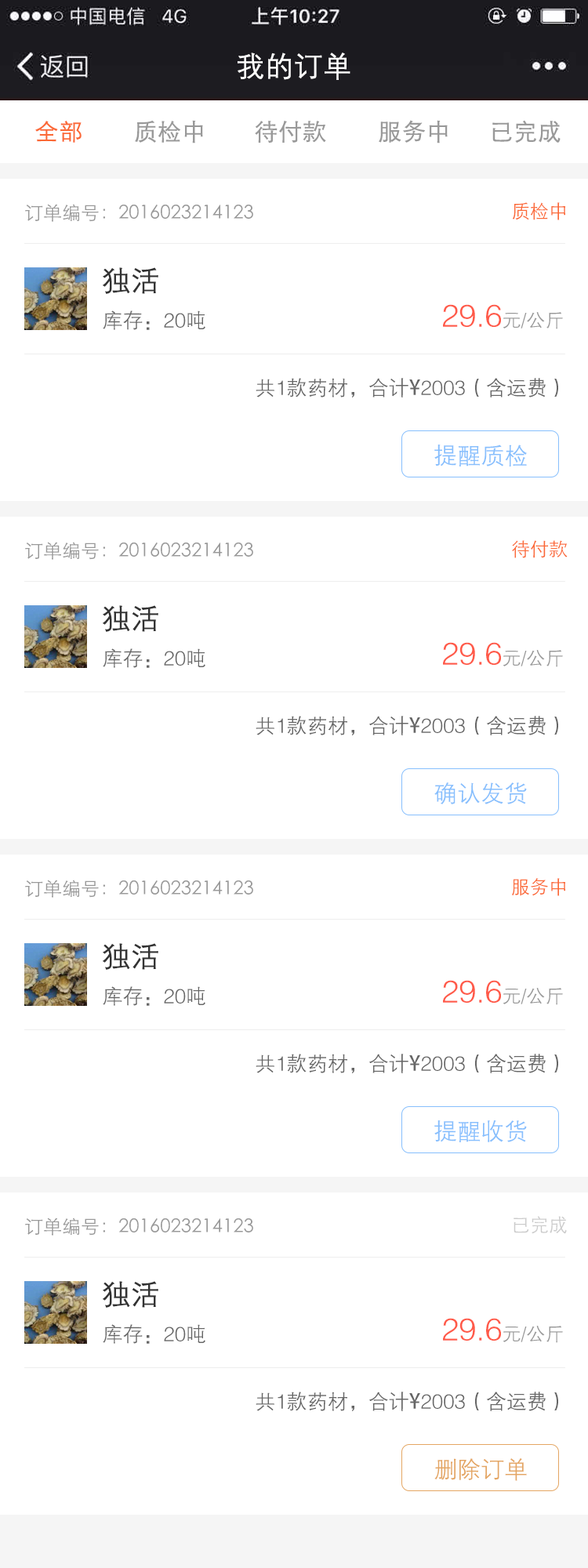
<style>
.page{position:relative;width:588px;height:1568px;background:#ffffff}
.page>*{position:absolute;margin:0}
.t1{font:28.2px "FZZDXJW--GB1-0";color:#ffffff;font-weight:bold}
.t2{font:23.5px "STXihei";color:#fb6936;font-weight:bold}
.t3{font:23.5px "STXihei";color:#999999;font-weight:bold}
.t4{font:18.8px "STXihei";color:#999999}
.t5{font:18.8px "STXihei";color:#fb6936}
.t6{font:28.2px "FZZDXJW--GB1-0";color:#333333;font-weight:bold}
.t7{font:31.4px "FZZDXJW--GB1-0";color:#ff5a49}
.t8{font:18.8px "FZZDXJW--GB1-0";color:#999999}
.t9{font:20.4px "FZZDXJW--GB1-0";color:#666666}
.t10{font:20.4px "AdobeHeitiStd-Regular";color:#666666}
.t11{font:23.5px "FZZDXJW--GB1-0";color:#87bffd}
.t12{font:18.8px "STXihei";color:#cccccc}
.t13{font:23.5px "FZZDXJW--GB1-0";color:#e4a663}
</style>
<div class="page">
<p class="t1" style="left:238px;top:53px;width:112px;height:27px">我的订单</p>
<p class="t2" style="left:35px;top:121px;width:47px;height:22px">全部</p>
<p class="t3" style="left:135px;top:120px;width:68px;height:23px">质检中</p>
<p class="t3" style="left:255px;top:121px;width:71px;height:22px">待付款</p>
<p class="t3" style="left:379px;top:120px;width:69px;height:23px">服务中</p>
<p class="t3" style="left:492px;top:120px;width:69px;height:23px">已完成</p>
<p class="t4" style="left:25px;top:204px;width:228px;height:18px">订单编号：2016023214123</p>
<p class="t5" style="left:512px;top:202px;width:53px;height:18px">质检中</p>
<p class="t6" style="left:103px;top:267px;width:55px;height:27px">独活</p>
<p class="t7" style="left:443px;top:304px;width:120px;height:25px">29.6<span class="t8">元/公斤</span></p>
<p class="t9" style="left:103px;top:310px;width:102px;height:20px">库存：20吨</p>
<p class="t9" style="left:256px;top:378px;width:302px;height:19px">共1款药材，合计<span class="t10">¥</span>2003（含运费）</p>
<p class="t11" style="left:434px;top:445px;width:93px;height:21px">提醒质检</p>
<p class="t4" style="left:25px;top:542px;width:228px;height:18px">订单编号：2016023214123</p>
<p class="t5" style="left:512px;top:540px;width:56px;height:18px">待付款</p>
<p class="t6" style="left:103px;top:605px;width:55px;height:27px">独活</p>
<p class="t9" style="left:103px;top:648px;width:102px;height:20px">库存：20吨</p>
<p class="t7" style="left:443px;top:642px;width:120px;height:25px">29.6<span class="t8">元/公斤</span></p>
<p class="t9" style="left:256px;top:716px;width:302px;height:19px">共1款药材，合计<span class="t10">¥</span>2003（含运费）</p>
<p class="t11" style="left:434px;top:782px;width:93px;height:22px">确认发货</p>
<p class="t4" style="left:25px;top:880px;width:228px;height:18px">订单编号：2016023214123</p>
<p class="t5" style="left:511px;top:878px;width:54px;height:18px">服务中</p>
<p class="t6" style="left:103px;top:943px;width:55px;height:27px">独活</p>
<p class="t9" style="left:103px;top:986px;width:102px;height:20px">库存：20吨</p>
<p class="t7" style="left:443px;top:980px;width:120px;height:25px">29.6<span class="t8">元/公斤</span></p>
<p class="t9" style="left:256px;top:1054px;width:302px;height:19px">共1款药材，合计<span class="t10">¥</span>2003（含运费）</p>
<p class="t11" style="left:434px;top:1120px;width:93px;height:22px">提醒收货</p>
<p class="t4" style="left:25px;top:1218px;width:228px;height:18px">订单编号：2016023214123</p>
<p class="t12" style="left:514px;top:1216px;width:53px;height:18px">已完成</p>
<p class="t6" style="left:103px;top:1281px;width:55px;height:27px">独活</p>
<p class="t9" style="left:103px;top:1324px;width:102px;height:20px">库存：20吨</p>
<p class="t7" style="left:443px;top:1318px;width:120px;height:25px">29.6<span class="t8">元/公斤</span></p>
<p class="t9" style="left:256px;top:1392px;width:302px;height:19px">共1款药材，合计<span class="t10">¥</span>2003（含运费）</p>
<p class="t13" style="left:434px;top:1458px;width:93px;height:23px">删除订单</p>
</div>
